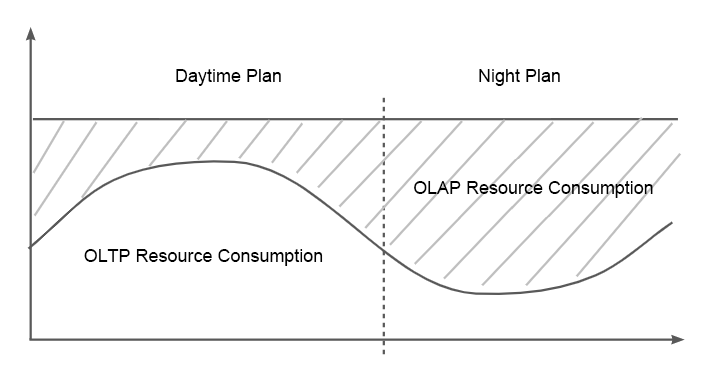
<style>
.page{position:relative;width:707px;height:378px;background:#ffffff}
.page>*{position:absolute;margin:0}
.t1{font:18px "ArialMT";color:#000000}
</style>
<div class="page">
<p class="t1" style="left:176px;top:69px;width:105px;height:17px">Daytime Plan</p>
<p class="t1" style="left:479px;top:69px;width:81px;height:17px">Night Plan</p>
<p class="t1" style="left:414px;top:181px;width:239px;height:17px">OLAP Resource Consumption</p>
<p class="t1" style="left:84px;top:249px;width:239px;height:17px">OLTP Resource Consumption</p>
</div>
